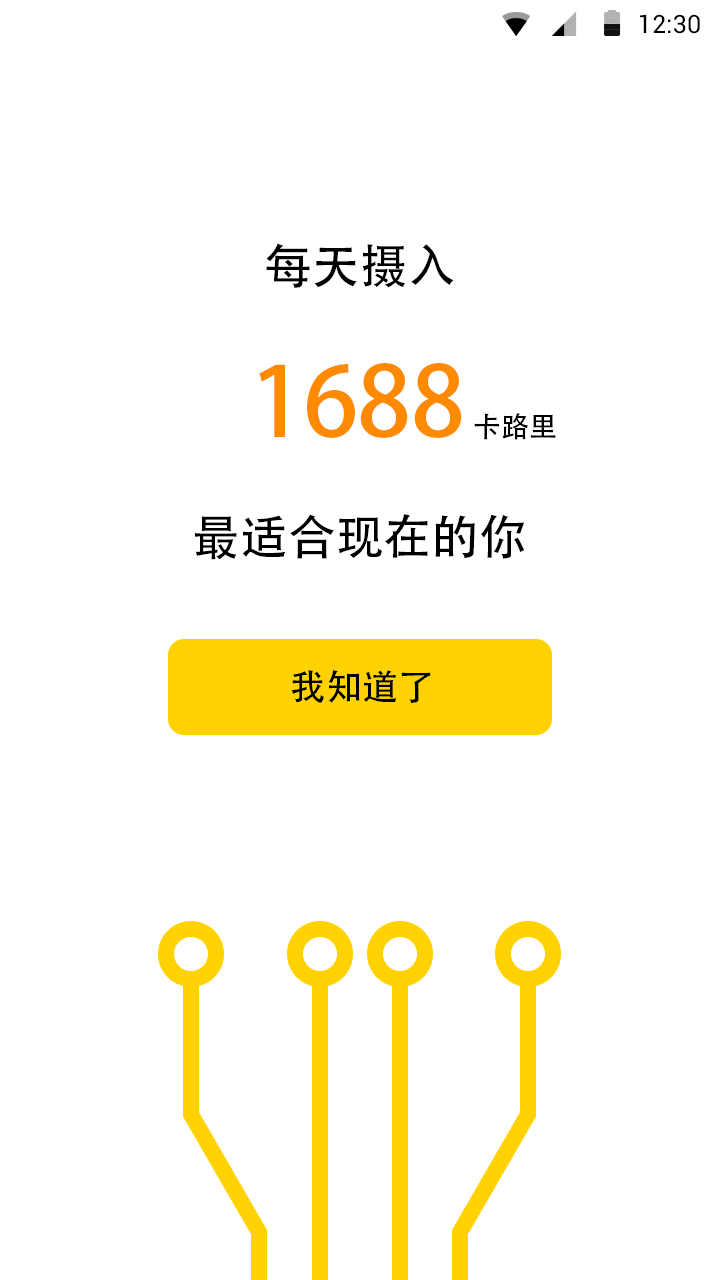
<style>
.page{position:relative;width:720px;height:1280px;background:#ffffff}
.page>*{position:absolute;margin:0}
.t1{font:25.4px "Roboto-Regular";color:#000000}
.t2{font:48px "AdobeHeitiStd-Regular";letter-spacing:-0.004em;color:#000000}
.t3{font:96px "AdobeHeitiStd-Regular";letter-spacing:-0.004em;color:#ff8a00}
.t4{font:28px "AdobeHeitiStd-Regular";letter-spacing:-0.004em;color:#000000}
.t5{font:36px "AdobeHeitiStd-Regular";letter-spacing:-0.004em;color:#000000}
</style>
<div class="page">
<p class="t1" style="left:640px;top:14px;width:60px;height:20px">12:30</p>
<p class="t2" style="left:266px;top:243px;width:188px;height:45px">每天摄入</p>
<p class="t3" style="left:259px;top:363px;width:203px;height:75px">1688</p>
<p class="t4" style="left:474px;top:413px;width:82px;height:27px">卡路里</p>
<p class="t2" style="left:195px;top:514px;width:330px;height:46px">最适合现在的你</p>
<p class="t5" style="left:291px;top:670px;width:140px;height:33px">我知道了</p>
</div>
